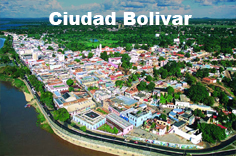
<style>
.page{position:relative;width:236px;height:156px}
.page>*{position:absolute;margin:0}
.t1{font:18px "Arial-Black";color:#ffffff}
</style>
<div class="page">
<p class="t1" style="left:49px;top:12px;width:143px;height:13px">Ciudad Bolivar</p>
</div>
